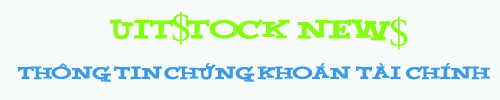
<style>
.page{position:relative;width:500px;height:100px;background:#f7fbfb}
.page>*{position:absolute;margin:0}
.t1{font:40px "VnTimes";color:#86fc10}
.t2{font:30px "VNI-Yahoo";color:#86fc10}
.t3{font:20px "VNI-Yahoo";color:#3c99e2}
</style>
<div class="page">
<p class="t1" style="left:172px;top:11px;width:18px;height:34px">$</p>
<p class="t1" style="left:390px;top:16px;width:18px;height:34px">$</p>
<p class="t2" style="left:109px;top:19px;width:282px;height:22px">UIT   TOCK  nEW</p>
<p class="t3" style="left:17px;top:63px;width:473px;height:19px">Thoâng tin chöùng khoaùn  taøi  chính</p>
</div>
